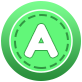
<style>
.page{position:relative;width:82px;height:82px;background:#ffffff}
.page>*{position:absolute;margin:0}
.t1{font:45px "FredokaOne-Regular";color:#ffffff}
</style>
<div class="page">
<p class="t1" style="left:24px;top:24px;width:34px;height:34px">A</p>
</div>
